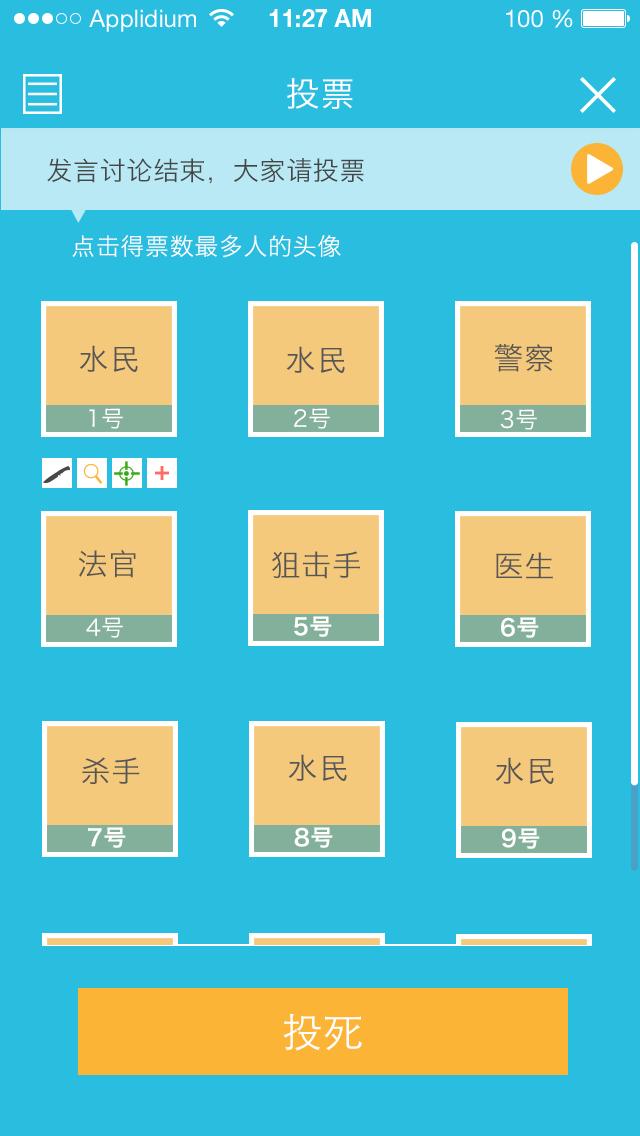
<style>
.page{position:relative;width:640px;height:1136px;background:#29bde0}
.page>*{position:absolute;margin:0}
.t1{font:34px "HiraginoSansGB-W3";letter-spacing:0.025em;color:#ffffff}
.t2{font:26px "HiraginoSansGB-W3";letter-spacing:0.025em;color:#464646}
.t3{font:24px "HiraginoSansGB-W3";letter-spacing:0.025em;color:#ffffff}
.t4{font:30px "HiraginoSansGB-W3";letter-spacing:0.025em;color:#565656}
.t5{font:22.8px "HiraginoSansGB-W3";letter-spacing:0.025em;color:#ffffff}
.t6{font:22.8px "HiraginoSansGB-W6";letter-spacing:0.025em;color:#ffffff}
.t7{font:40px "STHeitiSC-Light";letter-spacing:0.025em;color:#ffffff}
</style>
<div class="page">
<p class="t1" style="left:287px;top:78px;width:66px;height:31px">投票</p>
<p class="t2" style="left:47px;top:158px;width:317px;height:26px">发言讨论结束，大家请投票</p>
<p class="t3" style="left:72px;top:234px;width:269px;height:24px">点击得票数最多人的头像</p>
<p class="t4" style="left:79px;top:345px;width:59px;height:27px">水民</p>
<p class="t4" style="left:286px;top:346px;width:59px;height:27px">水民</p>
<p class="t4" style="left:494px;top:343px;width:59px;height:29px">警察</p>
<p class="t5" style="left:89px;top:408px;width:34px;height:21px">1号</p>
<p class="t5" style="left:294px;top:408px;width:36px;height:21px">2号</p>
<p class="t5" style="left:500px;top:409px;width:37px;height:21px">3号</p>
<p class="t4" style="left:78px;top:550px;width:58px;height:28px">法官</p>
<p class="t4" style="left:272px;top:551px;width:88px;height:28px">狙击手</p>
<p class="t4" style="left:496px;top:552px;width:57px;height:27px">医生</p>
<p class="t5" style="left:86px;top:617px;width:37px;height:21px">4号</p>
<p class="t6" style="left:294px;top:616px;width:38px;height:21px">5号</p>
<p class="t6" style="left:501px;top:617px;width:38px;height:21px">6号</p>
<p class="t4" style="left:82px;top:757px;width:58px;height:27px">杀手</p>
<p class="t4" style="left:288px;top:754px;width:59px;height:27px">水民</p>
<p class="t4" style="left:495px;top:757px;width:59px;height:27px">水民</p>
<p class="t6" style="left:88px;top:827px;width:38px;height:21px">7号</p>
<p class="t6" style="left:294px;top:827px;width:39px;height:21px">8号</p>
<p class="t6" style="left:501px;top:828px;width:39px;height:21px">9号</p>
<p class="t7" style="left:283px;top:1013px;width:79px;height:38px">投死</p>
</div>
